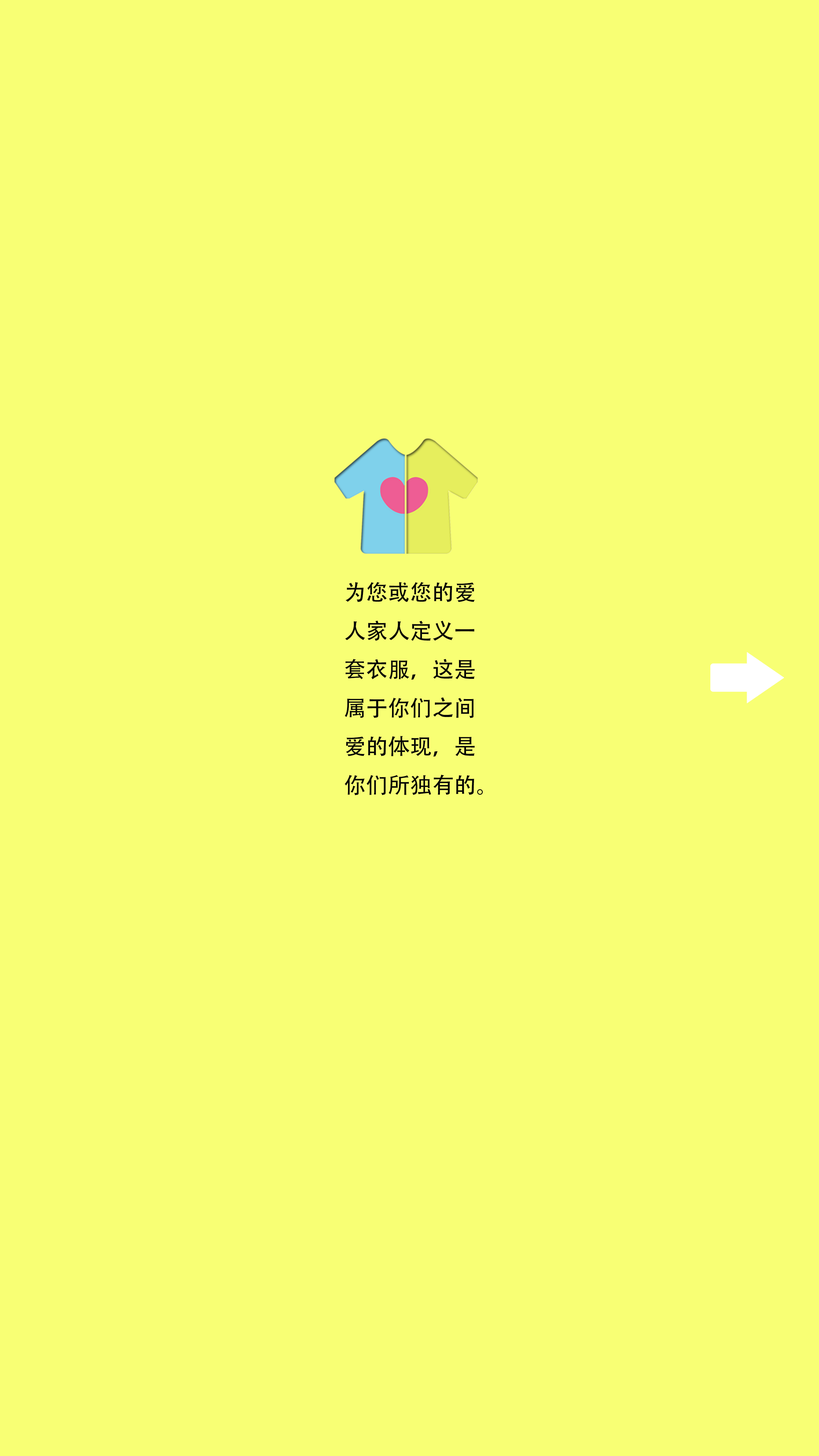
<style>
.page{position:relative;width:819px;height:1456px;background:#f8ff74}
.page>*{position:absolute;margin:0}
.t1{font:22px "AdobeHeitiStd-Regular";color:#050505}
</style>
<div class="page">
<p class="t1" style="left:345px;top:582px;width:138px;height:214px">为您或您的爱<br>人家人定义一<br>套衣服，这是<br>属于你们之间<br>爱的体现，是<br>你们所独有的。</p>
</div>
